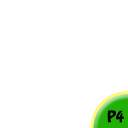
<style>
.page{position:relative;width:128px;height:128px;background:#ffffff}
.page>*{position:absolute;margin:0}
.t1{font:14px "HoboStd";color:#000000}
</style>
<div class="page">
<p class="t1" style="left:107px;top:110px;width:17px;height:13px">P4</p>
</div>
